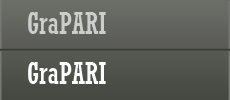
<style>
.page{position:relative;width:230px;height:100px}
.page>*{position:absolute;margin:0}
.t1{font:30px "Rockwell-Condensed";color:#cccecb}
.t2{font:30px "Rockwell-Condensed";color:#fefffe}
</style>
<div class="page">
<p class="t1" style="left:28px;top:12px;width:78px;height:22px">GraPARI</p>
<p class="t2" style="left:28px;top:62px;width:78px;height:22px">GraPARI</p>
</div>
